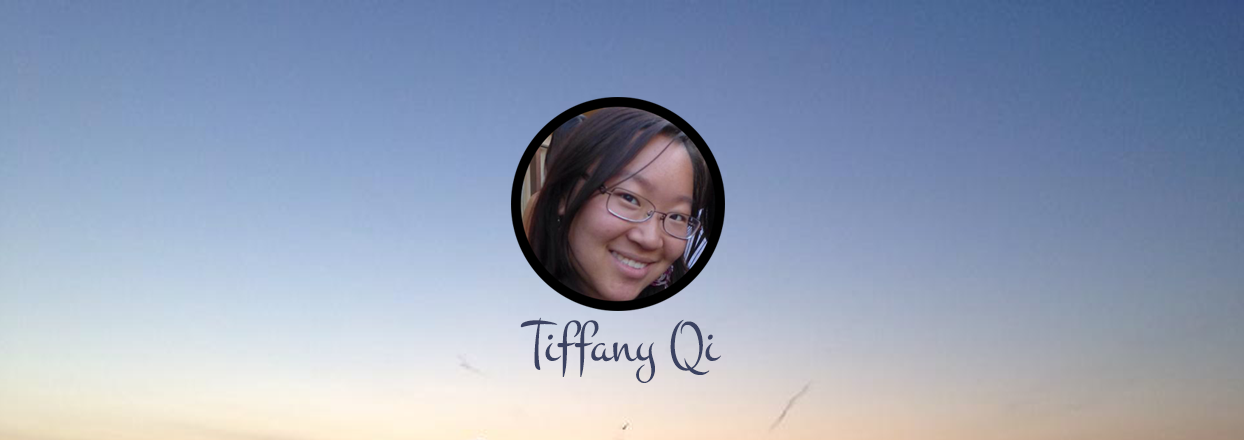
<style>
.page{position:relative;width:1244px;height:440px}
.page>*{position:absolute;margin:0}
.t1{font:60px "Montez-Regular";color:#3b4261}
</style>
<div class="page">
<p class="t1" style="left:520px;top:317px;width:201px;height:66px">Tiffany Qi</p>
</div>
